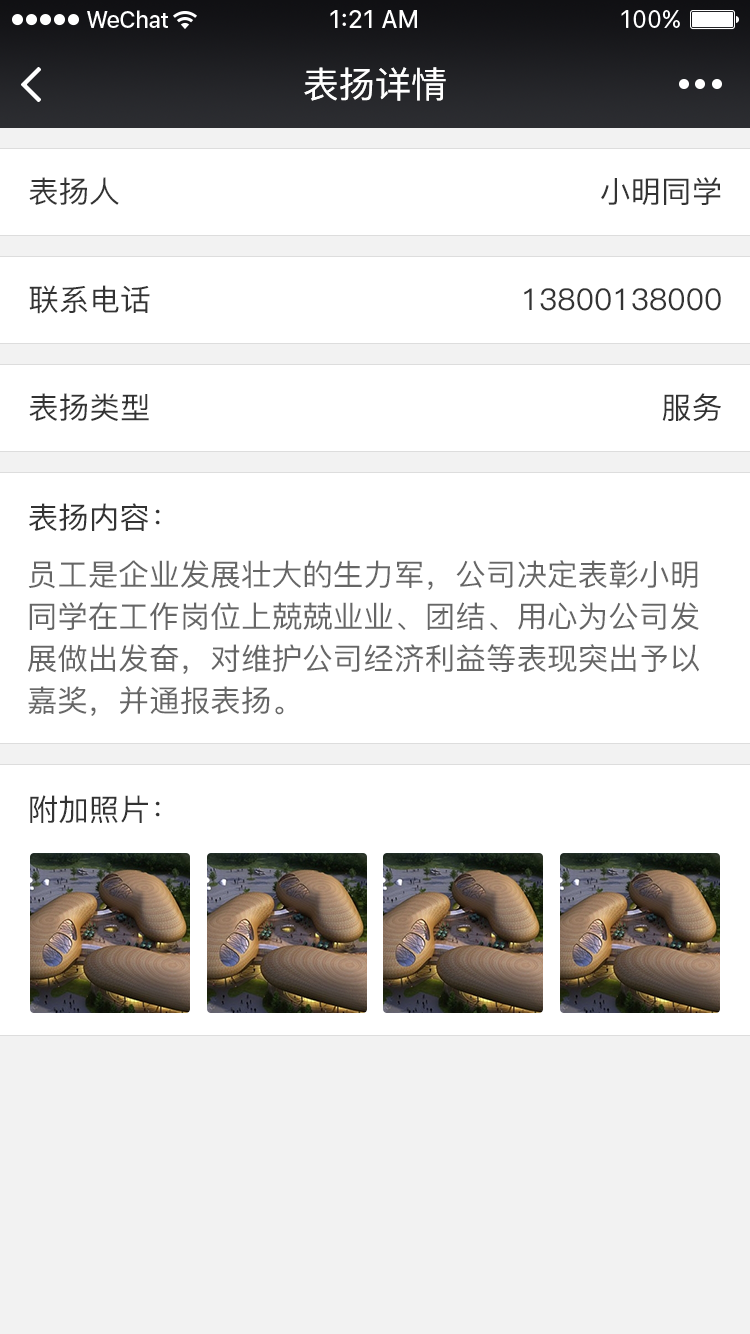
<style>
.page{position:relative;width:750px;height:1334px;background:#ffffff}
.page>*{position:absolute;margin:0}
.t1{font:36px "PingFang-SC-Medium";color:#ffffff}
.t2{font:30px "PingFang-SC-Medium";color:#333333}
.t3{font:30px/42px "PingFang-SC-Medium";color:#666666}
</style>
<div class="page">
<p class="t1" style="left:304px;top:67px;width:142px;height:34px">表扬详情</p>
<p class="t2" style="left:29px;top:177px;width:90px;height:28px">表扬人</p>
<p class="t2" style="left:601px;top:177px;width:120px;height:28px">小明同学</p>
<p class="t2" style="left:29px;top:285px;width:121px;height:29px">联系电话</p>
<p class="t2" style="left:524px;top:288px;width:197px;height:23px">13800138000</p>
<p class="t2" style="left:29px;top:393px;width:120px;height:28px">表扬类型</p>
<p class="t2" style="left:662px;top:393px;width:59px;height:28px">服务</p>
<p class="t2" style="left:29px;top:503px;width:131px;height:28px">表扬内容：</p>
<p class="t3" style="left:27px;top:560px;width:672px;height:156px">员工是企业发展壮大的生力军，公司决定表彰小明<br>同学在工作岗位上兢兢业业、团结、用心为公司发<br>展做出发奋，对维护公司经济利益等表现突出予以<br>嘉奖，并通报表扬。</p>
<p class="t2" style="left:30px;top:795px;width:130px;height:29px">附加照片：</p>
</div>
